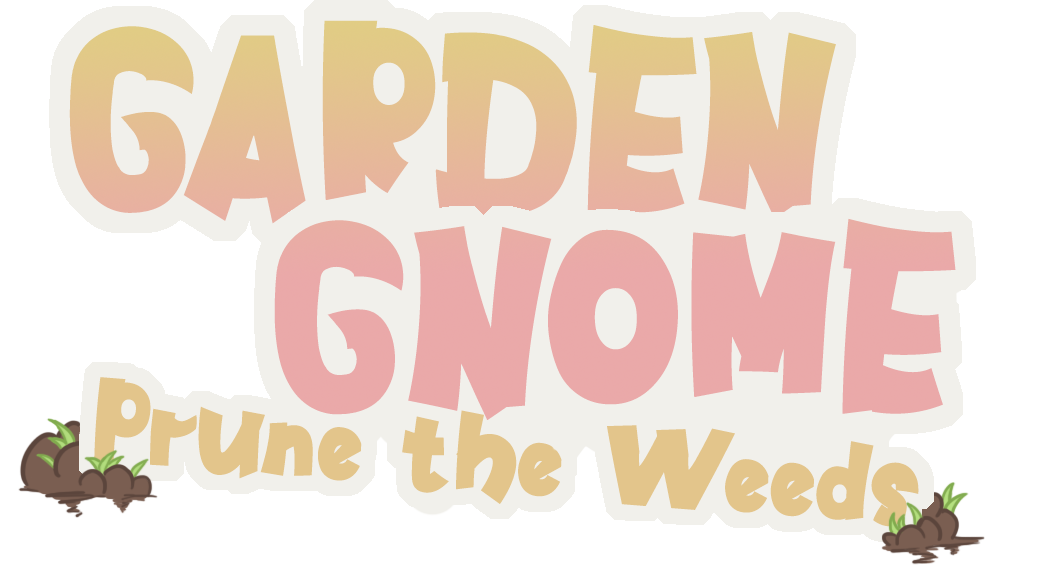
<style>
.page{position:relative;width:1052px;height:565px;background:#ffffff}
.page>*{position:absolute;margin:0}
.t1{font:240.4px "AmazingKidsRegular";color:#e5be93}
.t2{font:250px "AmazingKidsRegular";color:#eaa9a9}
.t3{font:114.2px "AmazingKidsRegular";color:#e3c58b}
</style>
<div class="page">
<p class="t1" style="left:69px;top:20px;width:767px;height:204px">GARDEN</p>
<p class="t2" style="left:274px;top:218px;width:682px;height:202px">GNOME</p>
<p class="t3" style="left:94px;top:377px;width:825px;height:150px;rotate:5deg">Prune the Weeds</p>
</div>
